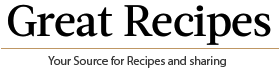
<style>
.page{position:relative;width:280px;height:72px;background:#ffffff}
.page>*{position:absolute;margin:0}
.t1{font:12px "MyriadPro-Regular";color:#3b3b3b}
</style>
<div class="page">
<p class="t1" style="left:48px;top:56px;width:178px;height:12px">Your Source for Recipes and sharing</p>
</div>
